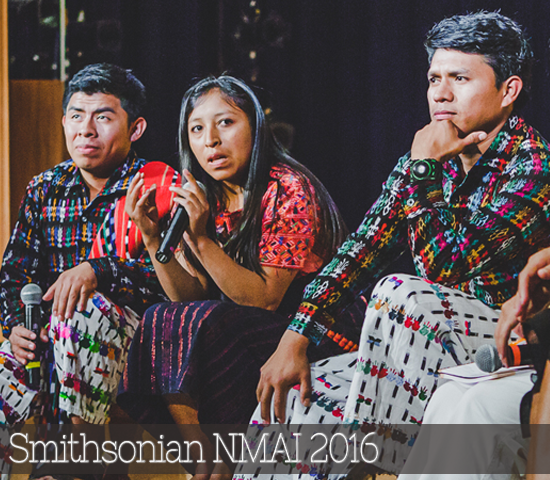
<style>
.page{position:relative;width:550px;height:480px}
.page>*{position:absolute;margin:0}
.t1{font:40.5px "NixieOne";letter-spacing:-0.07em;color:#f3f3f3;font-weight:bold;scale:0.84 1}
</style>
<div class="page">
<p class="t1" style="left:9px;top:432px;width:370px;height:31px">Smithsonian NMAI 2016</p>
</div>
